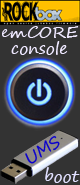
<style>
.page{position:relative;width:80px;height:185px;background:#333333}
.page>*{position:absolute;margin:0}
.t1{font:16px/16px "SegoePrint";color:#eee8ff}
.t2{font:16px/16px "SegoeScript";color:#eee8ff}
.t3{font:16px "SegoeScript";color:#0a00cd}
.t4{font:16px "SegoePrint";color:#e1e0ff}
</style>
<div class="page">
<p class="t1" style="left:2px;top:26px;width:77px;height:29px;text-align:center"><span class="t2">emCORE<br></span>console</p>
<p class="t3" style="left:25px;top:135px;width:35px;height:29px;rotate:-33deg">UMS</p>
<p class="t4" style="left:45px;top:167px;width:35px;height:16px">boot</p>
</div>
